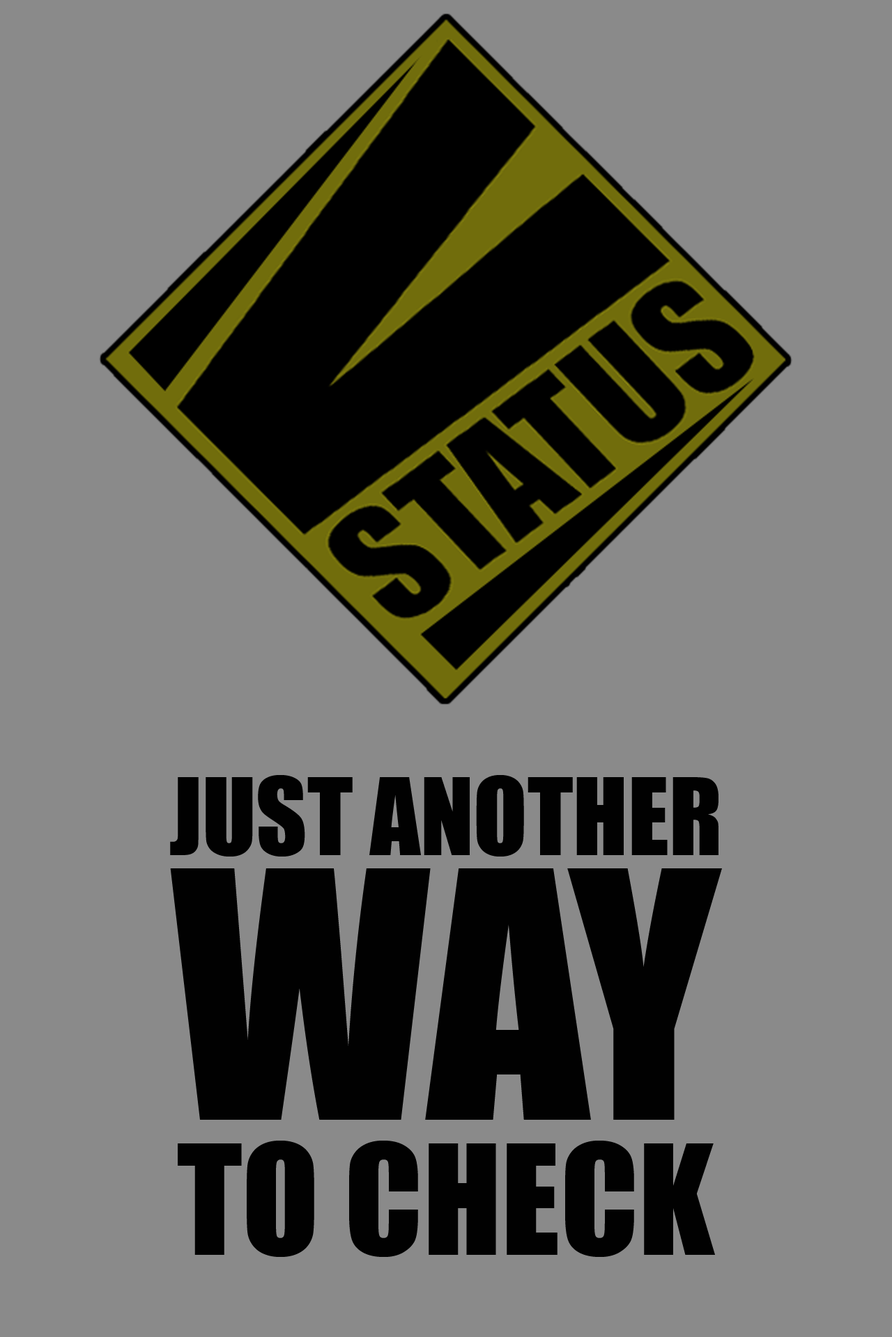
<style>
.page{position:relative;width:892px;height:1337px;background:#8a8a8a}
.page>*{position:absolute;margin:0}
.t1{font:98.7px "Impact";color:#010101;text-transform:uppercase}
.t2{font:318.1px/265.1px "Impact";color:#010101;text-transform:uppercase}
.t3{font:141.5px/134.9px "Impact";color:#010101;text-transform:uppercase}
</style>
<div class="page">
<p class="t1" style="left:170px;top:775px;width:552px;height:482px;text-align:center">Just another<br><span class="t2">way<br></span><span class="t3">to check</span></p>
</div>
